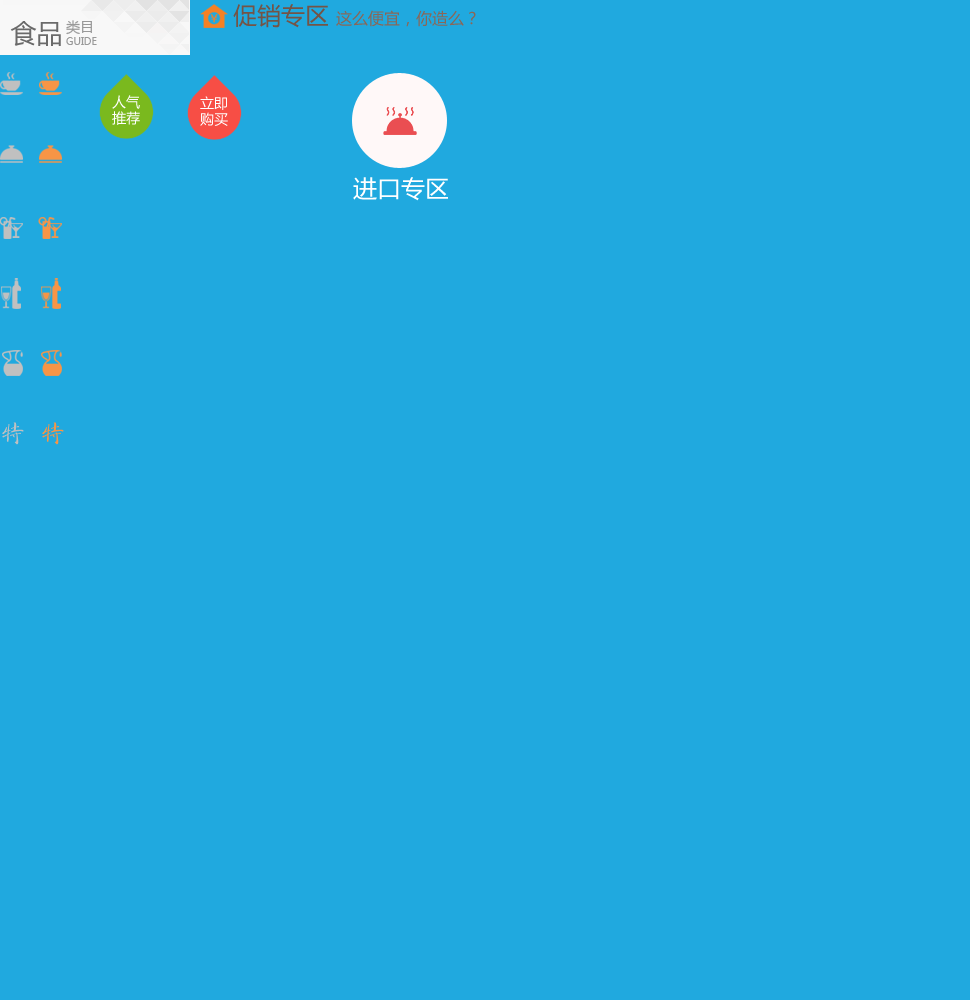
<style>
.page{position:relative;width:970px;height:1000px;background:#20a9df}
.page>*{position:absolute;margin:0}
.t1{font:16px "MicrosoftYaHei";color:#896758}
.t2{font:24px "MicrosoftYaHei";color:#745446}
.t3{font:26px "MicrosoftYaHei";color:#6a6a6a}
.t4{font:14px "MicrosoftYaHei";color:#999999}
.t5{font:10px "MicrosoftYaHei";color:#999999;text-transform:uppercase}
.t6{font:14px/16px "MicrosoftYaHei";color:#ffffff}
.t7{font:24px "MicrosoftYaHei";color:#ffffff}
</style>
<div class="page">
<p class="t1" style="left:233px;top:4px;width:243px;height:24px"><span class="t2">促销专区 </span>这么便宜，你造么？</p>
<p class="t3" style="left:10px;top:21px;width:51px;height:25px">食品</p>
<p class="t4" style="left:66px;top:20px;width:26px;height:15px">类目</p>
<p class="t5" style="left:66px;top:37px;width:31px;height:8px">guide</p>
<p class="t6" style="left:112px;top:95px;width:28px;height:30px">人气<br>推荐</p>
<p class="t6" style="left:200px;top:96px;width:28px;height:30px">立即<br>购买</p>
<p class="t7" style="left:353px;top:177px;width:95px;height:24px">进口专区</p>
</div>
